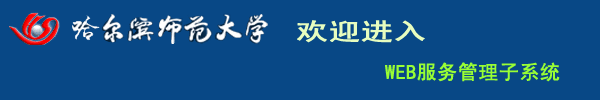
<style>
.page{position:relative;width:600px;height:100px;background:#084886}
.page>*{position:absolute;margin:0}
.t1{font:24px "SimHei";color:#e7fdbf;font-weight:bold;scale:1.33 1}
.t2{font:16.5px "SimHei";color:#084886;font-weight:bold;font-style:italic;scale:1.33 1}
.t3{font:20px "SimHei";color:#99fe34;font-weight:bold}
</style>
<div class="page">
<p class="t1" style="left:273px;top:20px;width:152px;height:23px"><span class="t2">hu</span>欢迎进入</p>
<p class="t3" style="left:385px;top:62px;width:175px;height:20px">WEB服务管理子系统</p>
</div>
